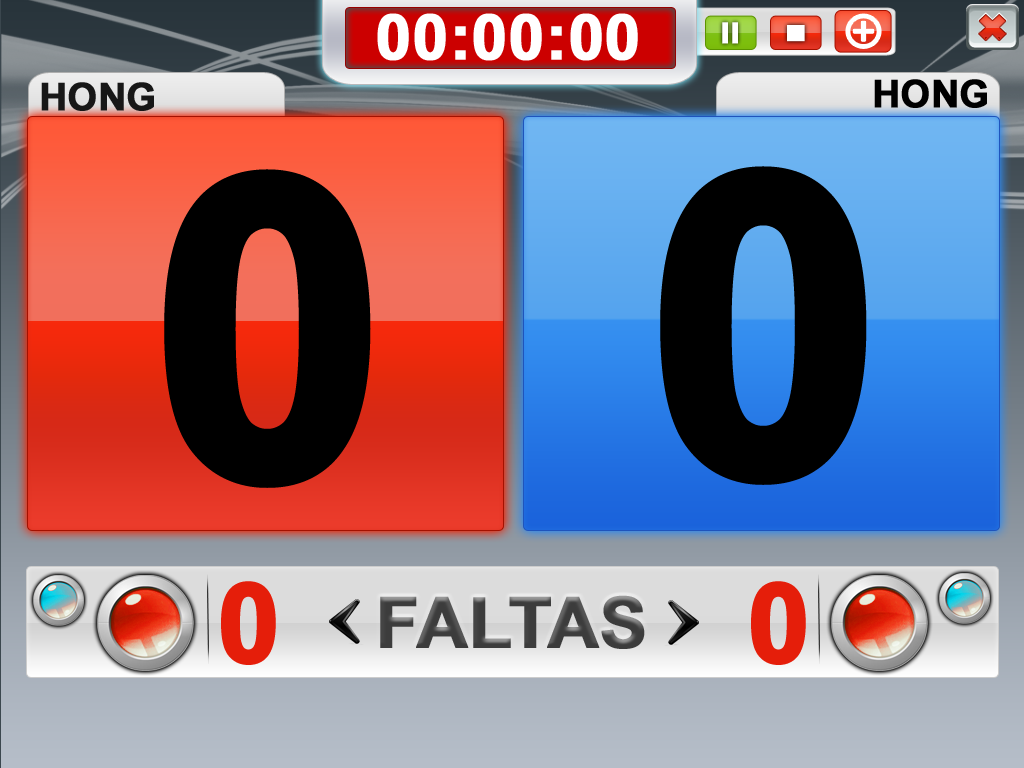
<style>
.page{position:relative;width:1024px;height:768px}
.page>*{position:absolute;margin:0}
.t1{font:63px "Arial-BoldMT";color:#ffffff;font-weight:bold}
.t2{font:28.9px "Arial-BoldMT";color:#ffffff;text-transform:uppercase;font-weight:bold;scale:1.15 1}
.t3{font:38px "Arial-BoldMT";color:#171717;text-transform:uppercase;font-weight:bold}
.t4{font:38px "Arial-BoldMT";color:#000000;text-transform:uppercase;font-weight:bold}
.t5{font:420px "Arial-BoldMT";color:#010101;font-weight:bold}
.t6{font:420px "Arial-BoldMT";color:#000000;font-weight:bold}
.t7{font:110px "Arial-BoldMT";color:#e51e0a;font-weight:bold}
.t8{font:70px "Arial-BoldMT";color:#3c3c3c;text-transform:uppercase;font-weight:bold}
</style>
<div class="page">
<p class="t1" style="left:377px;top:13px;width:261px;height:48px">00:00:00</p>
<p class="t2" style="left:722px;top:22px;width:16px;height:22px">II</p>
<p class="t3" style="left:41px;top:82px;width:113px;height:29px">hong</p>
<p class="t4" style="left:874px;top:79px;width:113px;height:29px">hong</p>
<p class="t5" style="left:164px;top:169px;width:207px;height:319px">0</p>
<p class="t6" style="left:660px;top:166px;width:207px;height:319px">0</p>
<p class="t7" style="left:221px;top:581px;width:55px;height:84px">0</p>
<p class="t7" style="left:751px;top:581px;width:55px;height:84px">0</p>
<p class="t8" style="left:380px;top:595px;width:265px;height:54px">fALTAS</p>
</div>
